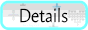
<style>
.page{position:relative;width:88px;height:30px;background:#ffffff}
.page>*{position:absolute;margin:0}
.t1{font:19.1px "Amira-Light";color:#000000;scale:0.91 1}
</style>
<div class="page">
<p class="t1" style="left:20px;top:7px;width:48px;height:16px">Details</p>
</div>
